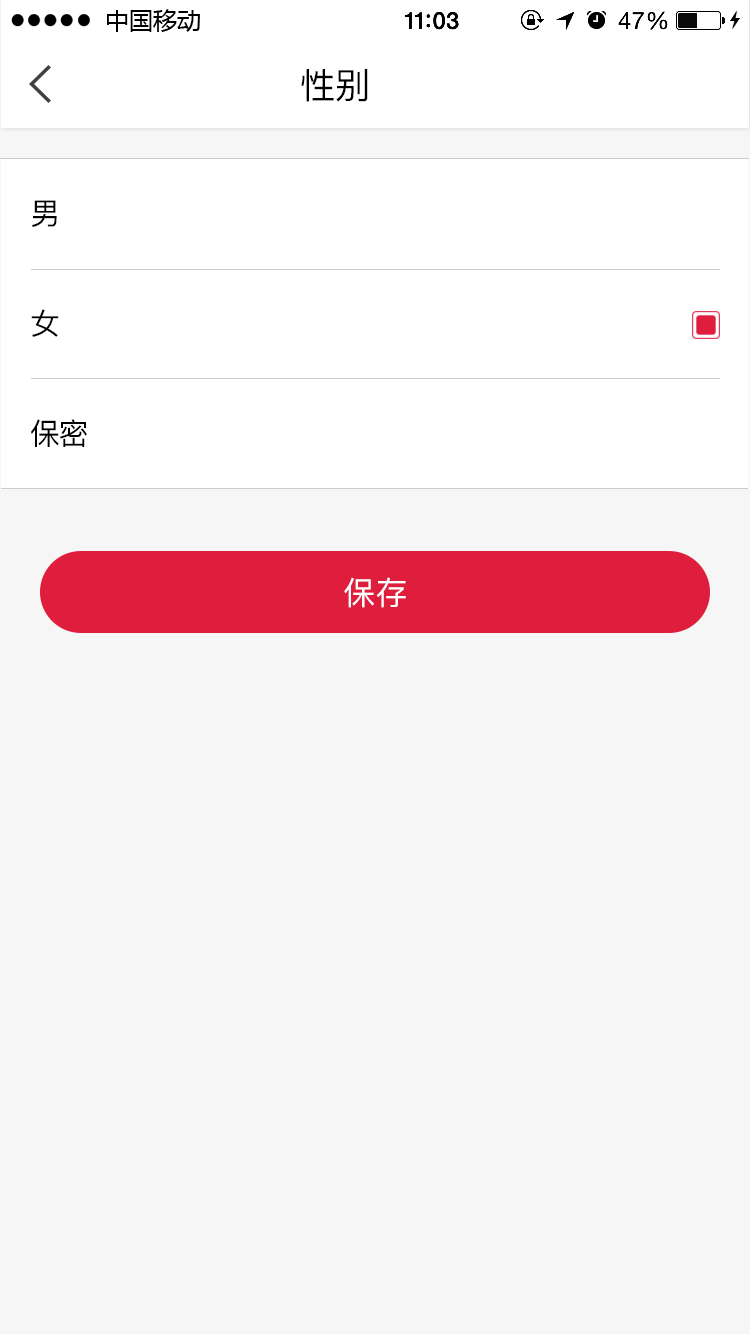
<style>
.page{position:relative;width:750px;height:1334px;background:#f6f6f6}
.page>*{position:absolute;margin:0}
.t1{font:35.7px "PingFang-SC-Medium";color:#000000}
.t2{font:30px/110px "PingFang-SC-Medium";letter-spacing:-0.06em;color:#000000}
.t3{font:32px "PingFang-SC-Medium";color:#ffffff}
</style>
<div class="page">
<p class="t1" style="left:301px;top:69px;width:67px;height:33px">性别</p>
<p class="t2" style="left:31px;top:200px;width:56px;height:247px">男<br>女 <br>保密</p>
<p class="t3" style="left:344px;top:577px;width:62px;height:31px">保存</p>
</div>
